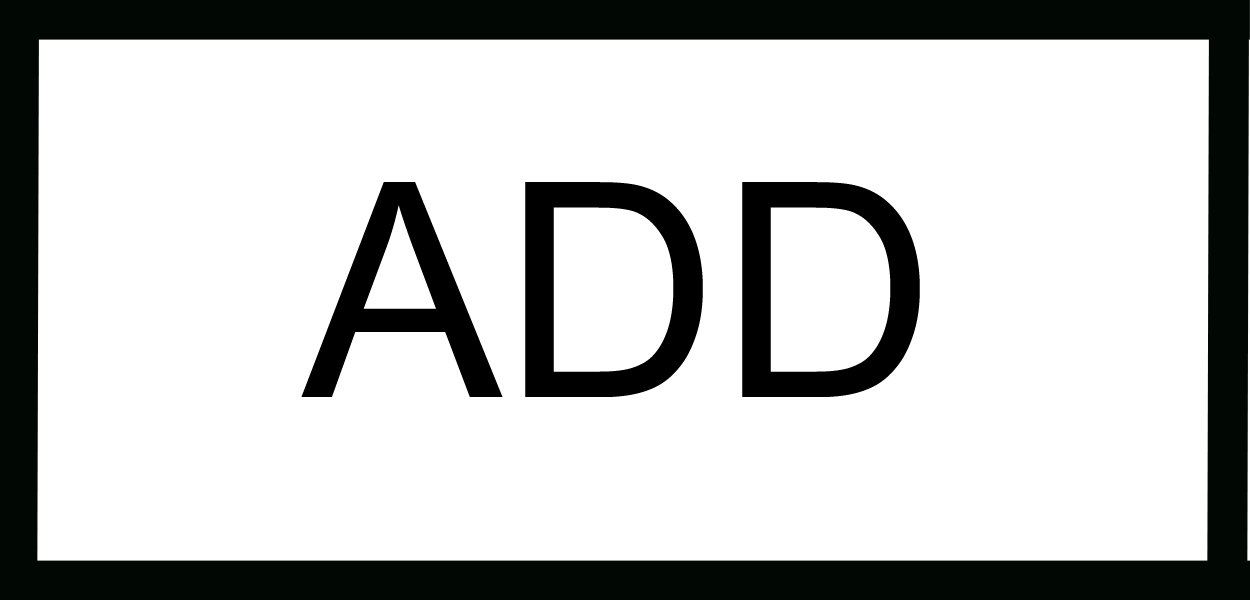
<style>
.page{position:relative;width:1250px;height:600px;background:#ffffff}
.page>*{position:absolute;margin:0}
.t1{font:300px "ArialMT";color:#000000}
</style>
<div class="page">
<p class="t1" style="left:301px;top:182px;width:619px;height:215px">ADD</p>
</div>
